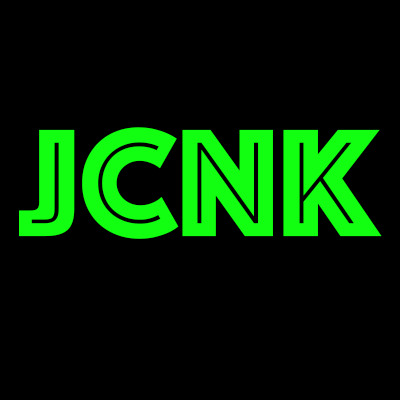
<style>
.page{position:relative;width:400px;height:400px;background:#000000}
.page>*{position:absolute;margin:0}
.t1{font:159px "Phosphate-Inline";color:#12ff12}
</style>
<div class="page">
<p class="t1" style="left:19px;top:127px;width:363px;height:112px">JCNK</p>
</div>
